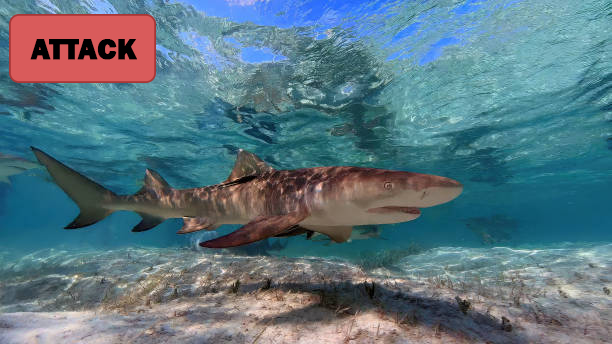
<style>
.page{position:relative;width:612px;height:344px}
.page>*{position:absolute;margin:0}
.t1{font:29.8px "FranklinGothic-Heavy";color:#000001;font-weight:bold}
</style>
<div class="page">
<p class="t1" style="left:30px;top:39px;width:107px;height:21px">ATTACK</p>
</div>
